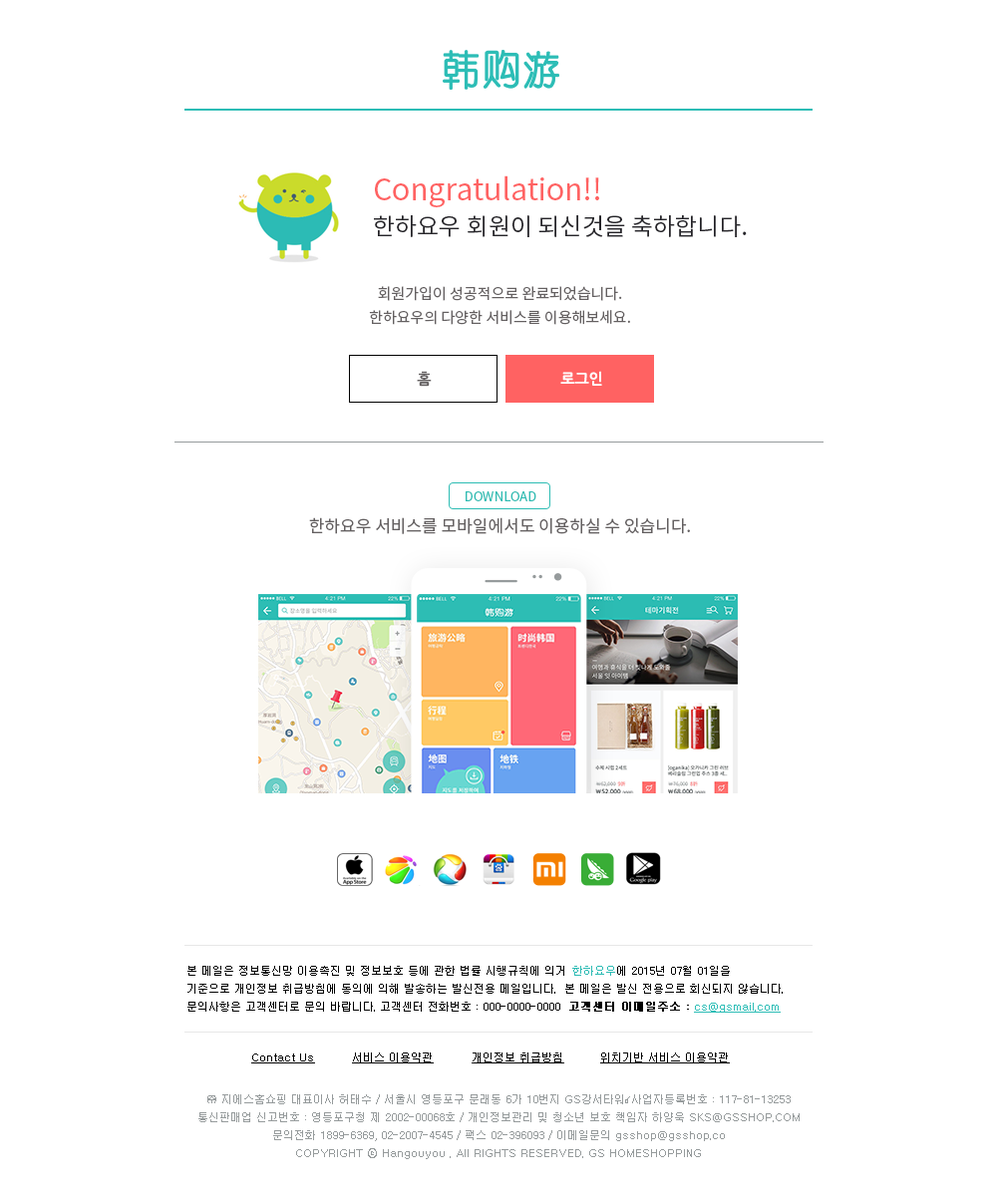
<style>
.page{position:relative;width:997px;height:1196px;background:#ffffff}
.page>*{position:absolute;margin:0}
.t1{font:23.9px/34.9px "NotoSansCJKkr-Regular";color:#26252a}
.t2{font:29.9px/35.9px "NotoSansCJKkr-Regular";color:#ff6262}
.t3{font:15px/23.9px "NotoSansCJKkr-Regular";color:#646061}
.t4{font:15px "NanumGothicBold";color:#646061}
.t5{font:15px "NanumGothicBold";color:#ffffff}
.t6{font:13px "NotoSansCJKkr-Regular";color:#2cbcb3}
.t7{font:16.9px "NotoSansCJKkr-Regular";color:#646061}
.t8{font:11px/17.9px "Dotum";color:#000000}
.t9{font:11px/17.9px "Dotum";color:#2cbbb4}
.t10{font:11px/17.9px "Dotum";color:#000000;font-weight:bold}
.t11{font:11px/17.9px "Dotum";color:#2dbdb6;text-decoration:underline}
.t12{font:11px "Dotum";color:#000000;text-decoration:underline}
.t13{font:11px/17.9px "Dotum";color:#969b9c}
</style>
<div class="page">
<p class="t1" style="left:374px;top:175px;width:373px;height:62px"><span class="t2">Congratulation!!<br></span>한하요우 회원이 되신것을 축하합니다.</p>
<p class="t3" style="left:369px;top:286px;width:261px;height:39px;text-align:center">회원가입이 성공적으로 완료되었습니다.<br>한하요우의 다양한 서비스를 이용해보세요.</p>
<p class="t4" style="left:417px;top:371px;width:15px;height:16px">홈</p>
<p class="t5" style="left:560px;top:371px;width:42px;height:15px">로그인</p>
<p class="t6" style="left:466px;top:491px;width:70px;height:10px">DOWNLOAD</p>
<p class="t7" style="left:309px;top:517px;width:381px;height:17px">한하요우 서비스를 모바일에서도 이용하실 수 있습니다.</p>
<p class="t8" style="left:187px;top:966px;width:596px;height:47px">본 메일은 정보통신망 이용촉진 및 정보보호 등에 관한 법률 시행규칙에 의거 <span class="t9">한하요우</span>에 2015년 07월 01일을<br>기준으로 개인정보 취급방침에 동의에 의해 발송하는 발신전용 메일입니다.  본 메일은 발신 전용으로 회신되지 않습니다.<br>문의사항은 고객센터로 문의 바랍니다. 고객센터 전화번호 : 000-0000-0000  <span class="t10">고객센터 이메일주소 : </span><span class="t11">cs@gsmail.com</span></p>
<p class="t12" style="left:251px;top:1054px;width:64px;height:10px">Contact Us</p>
<p class="t12" style="left:352px;top:1053px;width:82px;height:11px">서비스 이용약관</p>
<p class="t12" style="left:472px;top:1053px;width:92px;height:11px">개인정보 취급방침</p>
<p class="t12" style="left:600px;top:1053px;width:130px;height:11px">위치기반 서비스 이용약관</p>
<p class="t13" style="left:198px;top:1095px;width:601px;height:64px;text-align:center">㈜ 지에스홈쇼핑 대표이사 허태수 / 서울시 영등포구 문래동 6가 10번지 GS강서타워사업자등록번호 : 117-81-13253<br>통신판매업 신고번호 : 영등포구청 제 2002-00068호 / 개인정보관리 및 청소년 보호 책임자 하양욱 SKS@GSSHOP.COM<br>문의전화 1899-6369, 02-2007-4545 / 팩스 02-396093 / 이메일문의 gsshop@gsshop.co<br>COPYRIGHT ⓒ Hangouyou . All RIGHTS RESERVED. GS HOMESHOPPING</p>
</div>
